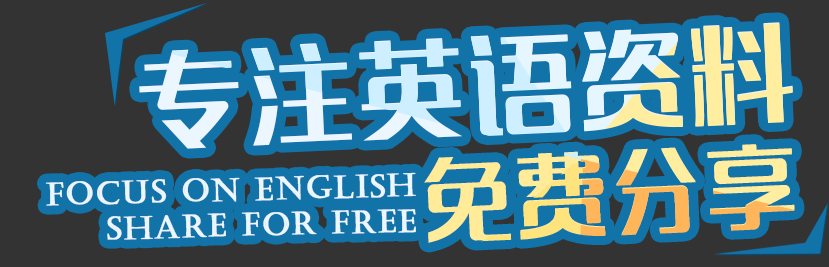
<style>
.page{position:relative;width:829px;height:267px;background:#333333}
.page>*{position:absolute;margin:0}
.t1{font:104.4px/120px "MFLangQian_Noncommercial-Regular";letter-spacing:0.06em;color:#ecf6ff}
.t2{font:89.4px/109px "MFLangQian_Noncommercial-Regular";letter-spacing:0.06em;color:#ffeb98}
.t3{font:30.9px/35.5px "Castellar";letter-spacing:0.06em;color:#ecf6ff;font-weight:bold}
</style>
<div class="page">
<p class="t1" style="left:139px;top:22px;width:656px;height:221px;rotate:-3deg">专注英语资料<br>           <span class="t2">免费分享</span></p>
<p class="t3" style="left:45px;top:172px;width:371px;height:68px;text-align:right;rotate:-1deg">Focus on English<br>share for free</p>
</div>
